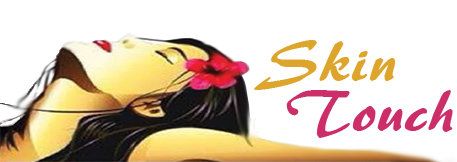
<style>
.page{position:relative;width:457px;height:162px;background:#ffffff}
.page>*{position:absolute;margin:0}
.t1{font:58.3px "ARBERKLEY";letter-spacing:0.01em;color:#dda52c;scale:1.1 1}
.t2{font:58.3px "ARBERKLEY";letter-spacing:0.01em;color:#cc2e69;scale:1.1 1}
</style>
<div class="page">
<p class="t1" style="left:254px;top:40px;width:142px;height:50px">Skin</p>
<p class="t2" style="left:286px;top:90px;width:167px;height:48px">Touch</p>
</div>
